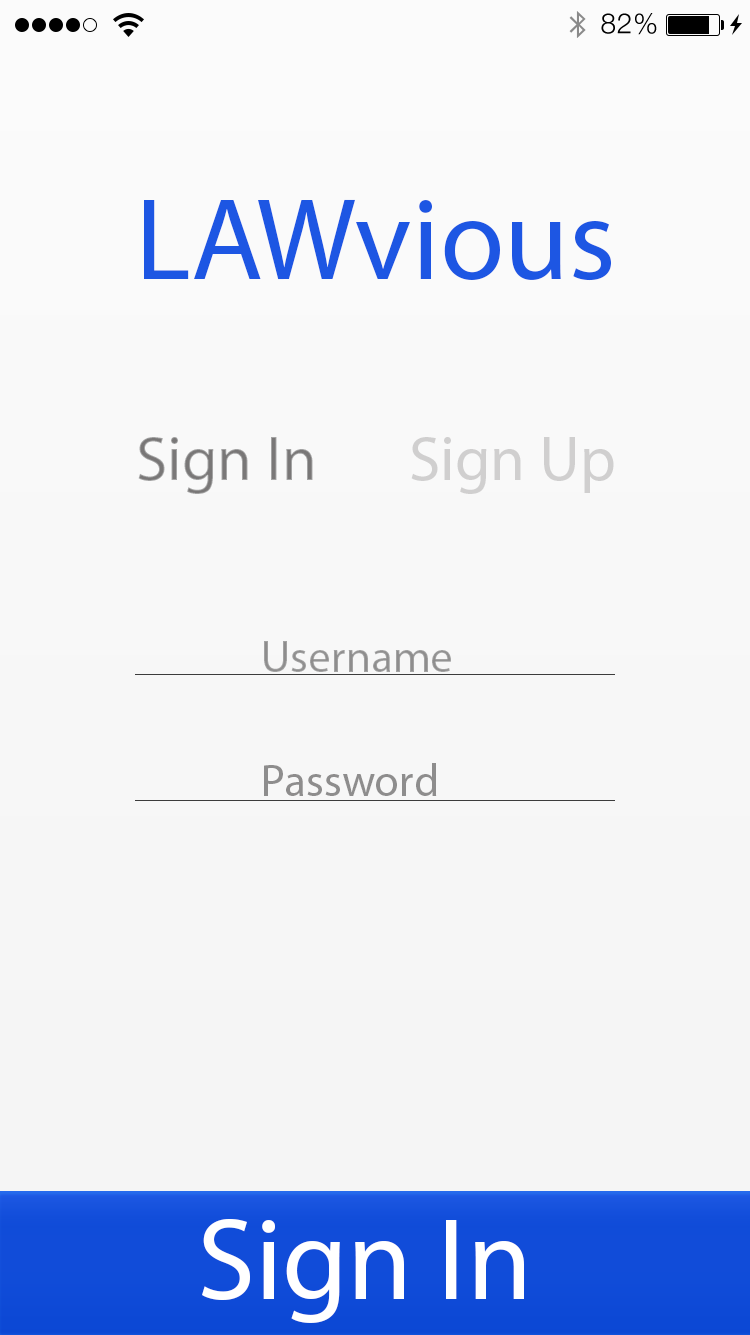
<style>
.page{position:relative;width:750px;height:1335px}
.page>*{position:absolute;margin:0}
.t1{font:28px "HelveticaNeue-Light";letter-spacing:0.025em;color:#000000}
.t2{font:117.7px "MyriadPro-Regular";color:#1d56e3}
.t3{font:63.4px "MyriadPro-Regular";color:#797777}
.t4{font:63.4px "MyriadPro-Regular";color:#d0cfcf}
.t5{font:45.3px "MyriadPro-Regular";color:#8e8d8d}
.t6{font:117.7px "MyriadPro-Regular";color:#ffffff}
</style>
<div class="page">
<p class="t1" style="left:601px;top:13px;width:56px;height:22px">82%</p>
<p class="t2" style="left:144px;top:199px;width:467px;height:82px">LAWvious</p>
<p class="t3" style="left:138px;top:437px;width:175px;height:57px">Sign In</p>
<p class="t4" style="left:411px;top:437px;width:203px;height:57px">Sign Up</p>
<p class="t5" style="left:264px;top:641px;width:187px;height:31px">Username</p>
<p class="t5" style="left:264px;top:763px;width:173px;height:33px">Password</p>
<p class="t6" style="left:202px;top:1219px;width:322px;height:104px">Sign In</p>
</div>
